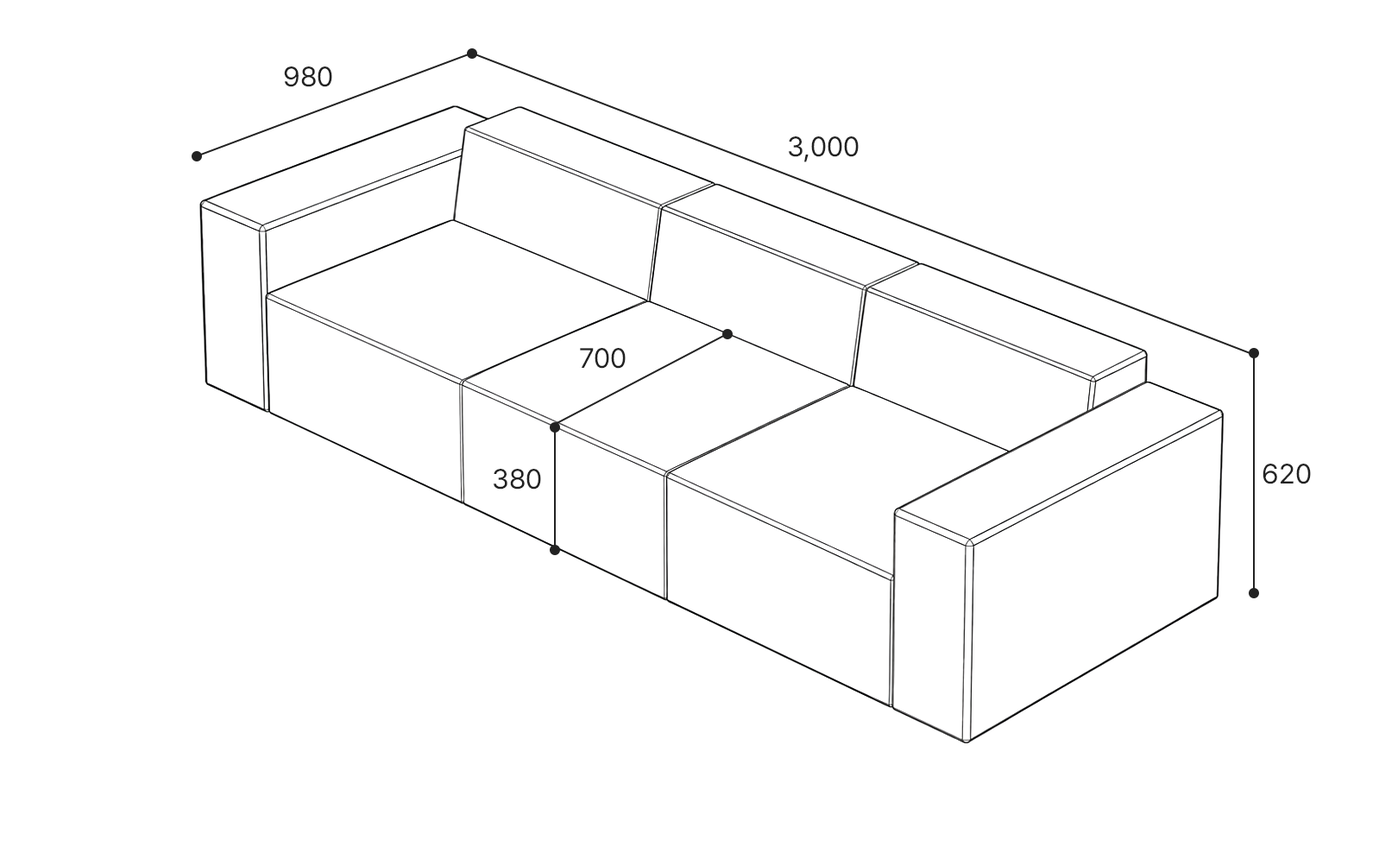
<style>
.page{position:relative;width:1398px;height:853px;background:#ffffff}
.page>*{position:absolute;margin:0}
.t1{font:27.6px "Pretendard-Regular";color:#222222}
</style>
<div class="page">
<p class="t1" style="left:284px;top:66px;width:48px;height:21px">980</p>
<p class="t1" style="left:789px;top:136px;width:70px;height:26px">3,000</p>
<p class="t1" style="left:580px;top:348px;width:46px;height:21px">700</p>
<p class="t1" style="left:494px;top:469px;width:47px;height:20px">380</p>
<p class="t1" style="left:1263px;top:464px;width:48px;height:20px">620</p>
</div>
